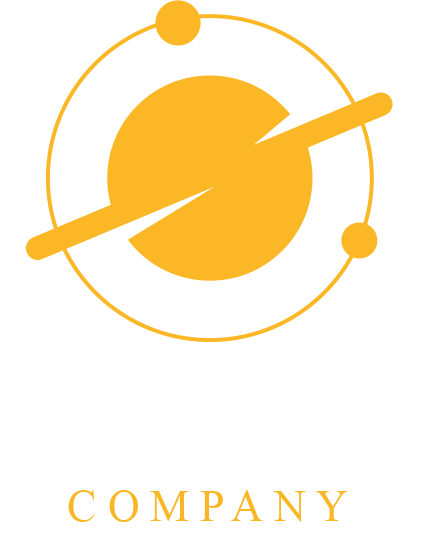
<style>
.page{position:relative;width:424px;height:533px;background:#ffffff}
.page>*{position:absolute;margin:0}
.t1{font:43.8px "Barlow-Regular";letter-spacing:0.25em;color:#fbb725;text-transform:uppercase}
</style>
<div class="page">
<p class="t1" style="left:68px;top:490px;width:280px;height:32px">company</p>
</div>
